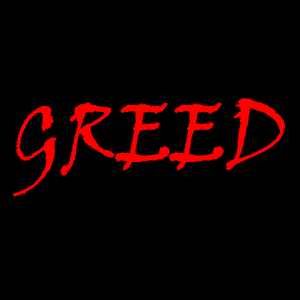
<style>
.page{position:relative;width:300px;height:300px;background:#000000}
.page>*{position:absolute;margin:0}
.t1{font:80px "VinerHandITC";color:#ff0000}
</style>
<div class="page">
<p class="t1" style="left:13px;top:98px;width:272px;height:99px">GREED</p>
</div>
